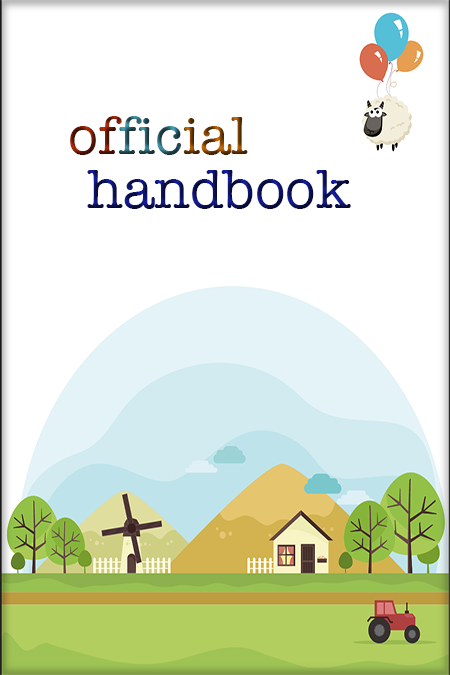
<style>
.page{position:relative;width:450px;height:675px;background:#ffffff}
.page>*{position:absolute;margin:0}
.t1{font:55px "AmericanTypewriter"}
.t2{font:55.9px "AmericanTypewriter"}
</style>
<div class="page">
<p class="t1" style="left:70px;top:116px;width:178px;height:39px">official</p>
<p class="t2" style="left:87px;top:170px;width:264px;height:39px">handbook</p>
</div>
